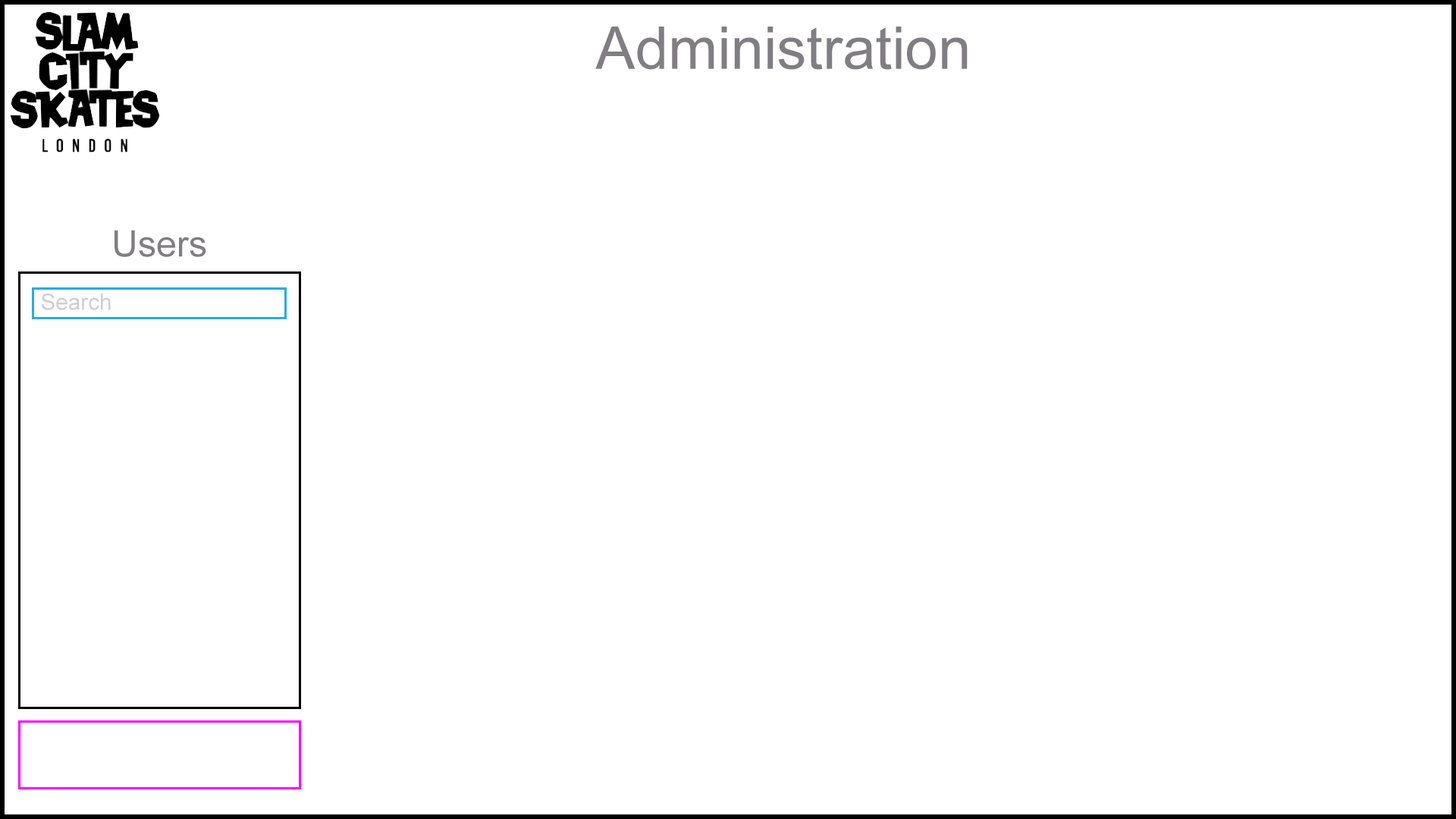
<style>
.page{position:relative;width:1456px;height:819px;background:#ffffff}
.page>*{position:absolute;margin:0}
.t1{font:59px "ArialMT";color:#807d83}
.t2{font:36.5px "ArialMT";color:#807d83}
.t3{font:22.5px "ArialMT";color:#cfcdd6}
</style>
<div class="page">
<p class="t1" style="left:595px;top:27px;width:373px;height:43px">Administration</p>
<p class="t2" style="left:115px;top:230px;width:91px;height:27px">Users</p>
<p class="t3" style="left:41px;top:293px;width:70px;height:17px">Search</p>
</div>
